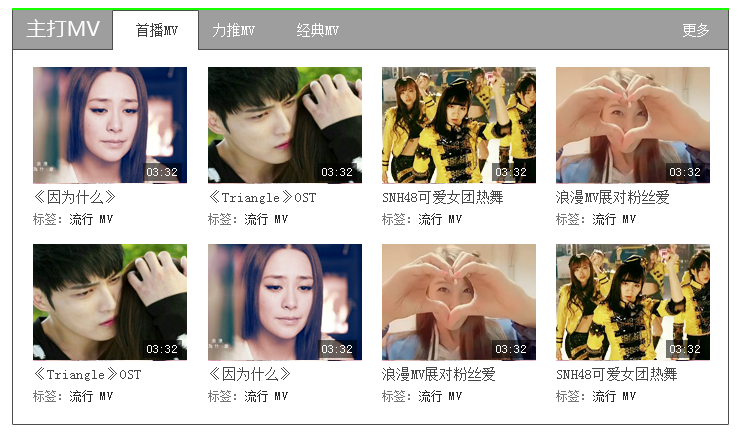
<style>
.page{position:relative;width:737px;height:438px;background:#ffffff}
.page>*{position:absolute;margin:0}
.t1{font:20.2px "MicrosoftYaHei";color:#fefefe}
.t2{font:14px "SimSun";color:#3b3b3b}
.t3{font:14px "SimSun";color:#fefefe}
.t4{font:14px "SimSun";color:#ffffff}
.t5{font:12px "SimSun";letter-spacing:0.02em;color:#fefefe}
.t6{font:14px "SimSun";letter-spacing:0.02em;color:#464646}
.t7{font:12px "SimSun";letter-spacing:0.02em;color:#272727}
.t8{font:12px "SimSun";letter-spacing:0.02em;color:#747474}
</style>
<div class="page">
<p class="t1" style="left:26px;top:19px;width:74px;height:18px">主打MV</p>
<p class="t2" style="left:136px;top:23px;width:42px;height:14px">首播MV</p>
<p class="t3" style="left:213px;top:23px;width:42px;height:14px">力推MV</p>
<p class="t3" style="left:297px;top:23px;width:42px;height:14px">经典MV</p>
<p class="t4" style="left:683px;top:23px;width:26px;height:14px">更多</p>
<p class="t5" style="left:147px;top:168px;width:30px;height:8px">03:32</p>
<p class="t5" style="left:322px;top:168px;width:30px;height:8px">03:32</p>
<p class="t5" style="left:496px;top:168px;width:30px;height:8px">03:32</p>
<p class="t5" style="left:670px;top:168px;width:30px;height:8px">03:32</p>
<p class="t6" style="left:35px;top:190px;width:80px;height:14px">《因为什么》</p>
<p class="t6" style="left:210px;top:190px;width:106px;height:14px">《Triangle》OST</p>
<p class="t6" style="left:383px;top:190px;width:120px;height:14px">SNH48可爱女团热舞</p>
<p class="t6" style="left:556px;top:190px;width:113px;height:14px">浪漫MV展对粉丝爱</p>
<p class="t7" style="left:33px;top:213px;width:80px;height:12px"><span class="t8">标签：</span>流行 MV</p>
<p class="t7" style="left:208px;top:213px;width:80px;height:12px"><span class="t8">标签：</span>流行 MV</p>
<p class="t7" style="left:382px;top:213px;width:80px;height:12px"><span class="t8">标签：</span>流行 MV</p>
<p class="t7" style="left:556px;top:213px;width:80px;height:12px"><span class="t8">标签：</span>流行 MV</p>
<p class="t5" style="left:147px;top:345px;width:30px;height:8px">03:32</p>
<p class="t5" style="left:322px;top:345px;width:30px;height:8px">03:32</p>
<p class="t5" style="left:496px;top:345px;width:30px;height:8px">03:32</p>
<p class="t5" style="left:670px;top:345px;width:30px;height:8px">03:32</p>
<p class="t6" style="left:35px;top:367px;width:106px;height:14px">《Triangle》OST</p>
<p class="t6" style="left:210px;top:367px;width:80px;height:14px">《因为什么》</p>
<p class="t6" style="left:382px;top:367px;width:113px;height:14px">浪漫MV展对粉丝爱</p>
<p class="t6" style="left:557px;top:367px;width:120px;height:14px">SNH48可爱女团热舞</p>
<p class="t7" style="left:33px;top:390px;width:80px;height:12px"><span class="t8">标签：</span>流行 MV</p>
<p class="t7" style="left:208px;top:390px;width:80px;height:12px"><span class="t8">标签：</span>流行 MV</p>
<p class="t7" style="left:382px;top:390px;width:80px;height:12px"><span class="t8">标签：</span>流行 MV</p>
<p class="t7" style="left:556px;top:390px;width:80px;height:12px"><span class="t8">标签：</span>流行 MV</p>
</div>
